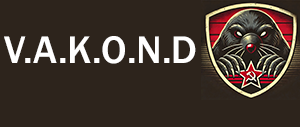
<style>
.page{position:relative;width:300px;height:127px;background:#2d241c}
.page>*{position:absolute;margin:0}
.t1{font:39.8px "FranklinGothic-Medium";color:#ffffff}
</style>
<div class="page">
<p class="t1" style="left:4px;top:36px;width:192px;height:28px">V.A.K.O.N.D</p>
</div>
